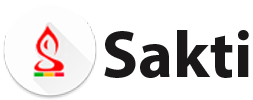
<style>
.page{position:relative;width:253px;height:100px;background:#ffffff}
.page>*{position:absolute;margin:0}
.t1{font:66.7px "MyriadPro-Bold";color:#1a1818}
</style>
<div class="page">
<p class="t1" style="left:104px;top:30px;width:145px;height:48px">Sakti</p>
</div>
